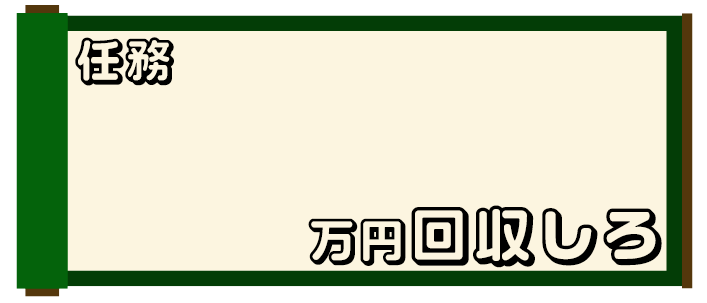
<style>
.page{position:relative;width:707px;height:303px;background:#fcf5e0}
.page>*{position:absolute;margin:0}
.t1{font:50px "VDL-LogoMaru-pop-Shadow";letter-spacing:-0.025em;color:#000000;font-weight:bold}
.t2{font:64px "VDL-LogoMaru-pop-Shadow";letter-spacing:-0.025em;color:#000000;font-weight:bold}
</style>
<div class="page">
<p class="t1" style="left:75px;top:37px;width:99px;height:49px">任務</p>
<p class="t2" style="left:308px;top:205px;width:354px;height:63px"><span class="t1">万円</span>回収しろ</p>
</div>
